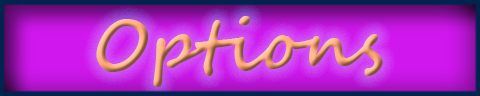
<style>
.page{position:relative;width:480px;height:96px}
.page>*{position:absolute;margin:0}
.t1{font:70.9px "SegoeScript-Bold"}
</style>
<div class="page">
<p class="t1" style="left:96px;top:16px;width:287px;height:71px">Options</p>
</div>
